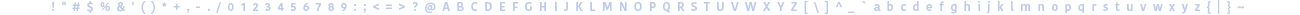
<style>
.page{position:relative;width:1300px;height:15px;background:#ffffff}
.page>*{position:absolute;margin:0}
.t1{font:12px "KohinoorDevanagari-Medium";letter-spacing:0.54em;color:#becbe7}
</style>
<div class="page">
<p class="t1" style="left:52px;top:0px;width:1192px;height:14px">!"#$%&amp;'()*+,-./0123456789:;&lt;=&gt;?@ABCDEFGHIJKLMNOPQRSTUVWXYZ[\]^_`abcdefghijklmnopqrstuvwxyz{|}~</p>
</div>
